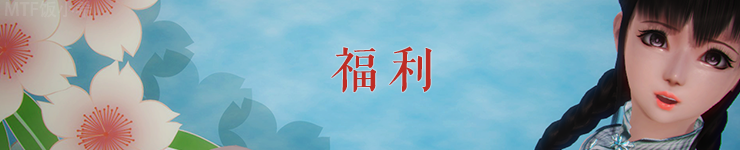
<style>
.page{position:relative;width:740px;height:150px}
.page>*{position:absolute;margin:0}
.t1{font:18px "AdobeHeitiStd-Regular";color:#beafa6}
.t2{font:48px "FZQKBYSJW--GB1-0";letter-spacing:0.2em;color:#be2d25}
</style>
<div class="page">
<p class="t1" style="left:5px;top:0px;width:87px;height:18px">MTF饭小希</p>
<p class="t2" style="left:331px;top:46px;width:101px;height:47px">福利</p>
</div>
